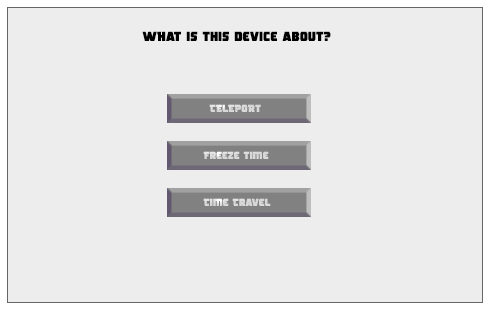
<style>
.page{position:relative;width:491px;height:311px;background:#ededed}
.page>*{position:absolute;margin:0}
.t1{font:12.9px "RogueHero";color:#000000}
.t2{font:10.4px "RogueHero";color:#d9d8d8}
.t3{font:10.4px "RogueHero";color:#dad9d9}
</style>
<div class="page">
<p class="t1" style="left:142px;top:31px;width:189px;height:10px">WHat is this device about?</p>
<p class="t2" style="left:209px;top:104px;width:52px;height:8px">TELEPORt</p>
<p class="t3" style="left:203px;top:151px;width:66px;height:8px">Freeze time</p>
<p class="t3" style="left:203px;top:198px;width:68px;height:8px">Time Travel</p>
</div>
